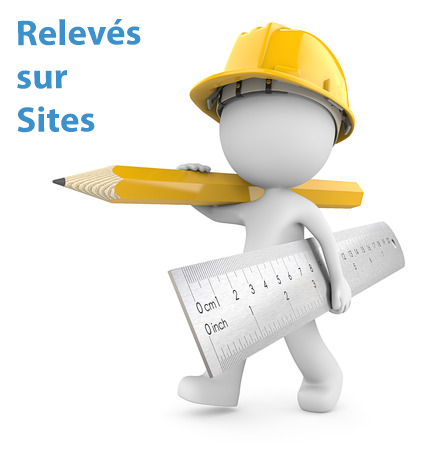
<style>
.page{position:relative;width:434px;height:450px;background:#ffffff}
.page>*{position:absolute;margin:0}
.t1{font:36.2px "MyriadPro-Bold";color:#3a91cb}
</style>
<div class="page">
<p class="t1" style="left:17px;top:19px;width:124px;height:114px">Relevés <br>sur <br>Sites</p>
</div>
